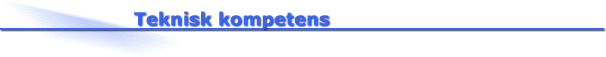
<style>
.page{position:relative;width:606px;height:57px;background:#ffffff}
.page>*{position:absolute;margin:0}
.t1{font:18px "Verdana-Bold";color:#3366ff}
</style>
<div class="page">
<p class="t1" style="left:134px;top:11px;width:195px;height:18px">Teknisk kompetens</p>
</div>
